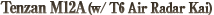
<style>
.page{position:relative;width:214px;height:15px;background:#ffffff}
.page>*{position:absolute;margin:0}
.t1{font:16px "RyuminPro-ExBold";letter-spacing:-0.08em;color:#4a3f32;font-weight:bold;scale:0.9 1}
.t2{font:14px "RyuminPro-ExBold";letter-spacing:-0.08em;color:#4a3f32;font-weight:bold;scale:0.9 1}
</style>
<div class="page">
<p class="t1" style="left:0px;top:1px;width:87px;height:13px">Tenzan M12A</p>
<p class="t2" style="left:88px;top:2px;width:124px;height:14px">(w/ T6 Air Radar Kai)</p>
</div>
